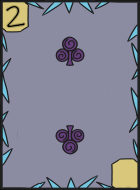
<style>
.page{position:relative;width:140px;height:190px;background:#8b8ca2}
.page>*{position:absolute;margin:0}
.t1{font:30px "InkFree";letter-spacing:-0.025em;color:#000000}
</style>
<div class="page">
<p class="t1" style="left:6px;top:6px;width:19px;height:21px">2</p>
</div>
